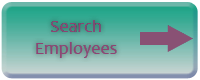
<style>
.page{position:relative;width:200px;height:80px}
.page>*{position:absolute;margin:0}
.t1{font:18px "Candara";color:#904273}
</style>
<div class="page">
<p class="t1" style="left:36px;top:20px;width:81px;height:38px">Search<br>   Employees</p>
</div>
